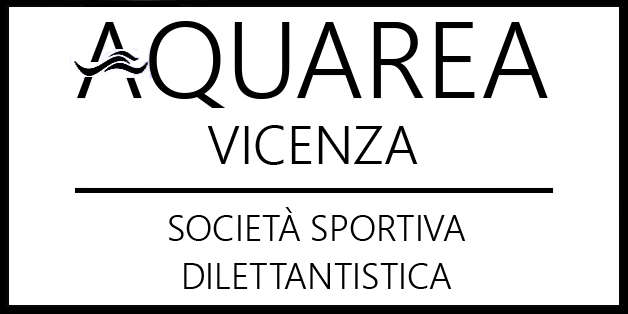
<style>
.page{position:relative;width:628px;height:314px;background:#ffffff}
.page>*{position:absolute;margin:0}
.t1{font:54px "SegoeUI-Semilight";color:#000000}
.t2{font:36px/48px "SegoeUI-Semilight";color:#000000}
</style>
<div class="page">
<p class="t1" style="left:207px;top:125px;width:211px;height:40px">VICENZA</p>
<p class="t2" style="left:169px;top:207px;width:297px;height:82px;text-align:center">SOCIETÀ SPORTIVA<br>DILETTANTISTICA</p>
</div>
